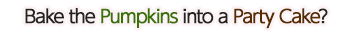
<style>
.page{position:relative;width:352px;height:33px;background:#ffffff}
.page>*{position:absolute;margin:0}
.t1{font:18px "UDShinGoPro-Regular";letter-spacing:-0.08em;color:#592b00;font-weight:bold}
.t2{font:18px "UDShinGoPro-Regular";letter-spacing:-0.08em;color:#232320;font-weight:bold}
.t3{font:18px "UDShinGoPro-Regular";letter-spacing:-0.08em;color:#3a7103;font-weight:bold}
</style>
<div class="page">
<p class="t1" style="left:25px;top:8px;width:303px;height:21px"><span class="t2">Bake the </span><span class="t3">Pumpkins</span><span class="t2"> into a </span>Party Cake<span class="t2">?</span></p>
</div>
